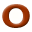
<style>
.page{position:relative;width:32px;height:32px;background:#ffffff}
.page>*{position:absolute;margin:0}
.t1{font:35px "MyriadPro-Bold";color:#9a3000;scale:1.2 1}
</style>
<div class="page">
<p class="t1" style="left:2px;top:4px;width:28px;height:24px">O</p>
</div>
